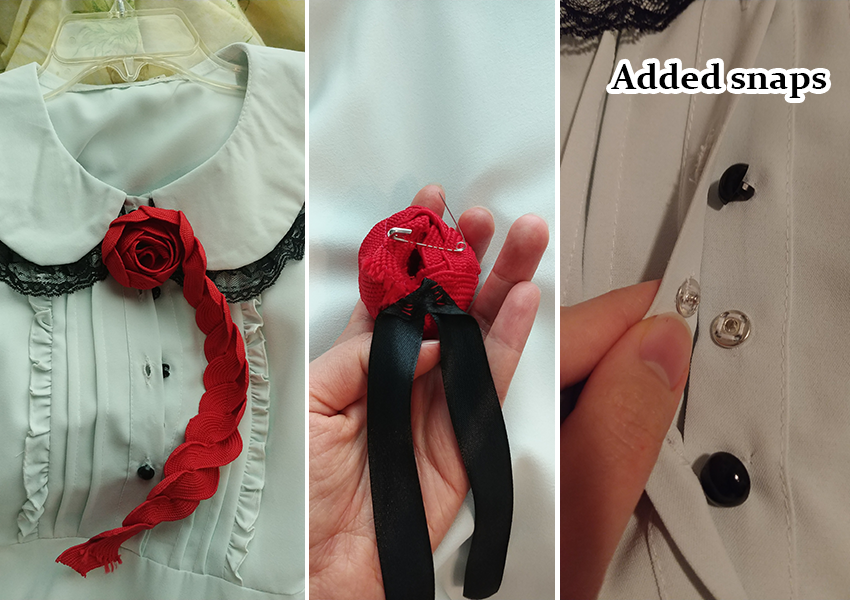
<style>
.page{position:relative;width:850px;height:600px}
.page>*{position:absolute;margin:0}
.t1{font:36px "Constantia-Bold";color:#000000}
</style>
<div class="page">
<p class="t1" style="left:611px;top:63px;width:216px;height:35px">Added snaps</p>
</div>
